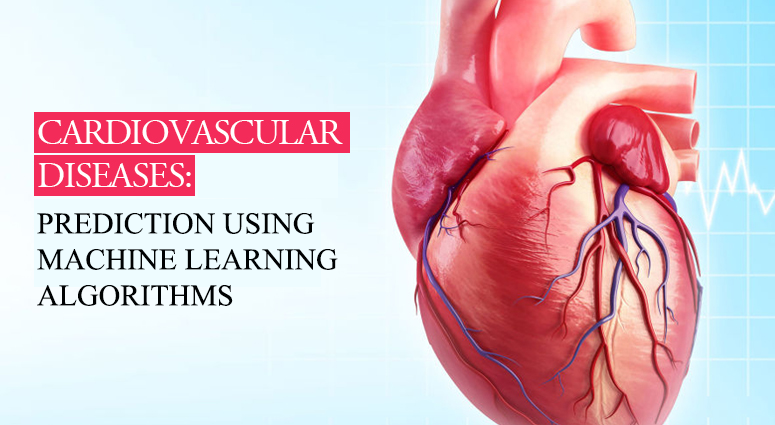
<style>
.page{position:relative;width:775px;height:425px}
.page>*{position:absolute;margin:0}
.t1{font:30px "TimesNewRomanPSMT";color:#000203}
</style>
<div class="page">
<p class="t1" style="left:37px;top:213px;width:301px;height:93px">PREDICTION USING <br>MACHINE LEARNING<br>ALGORITHMS</p>
</div>
